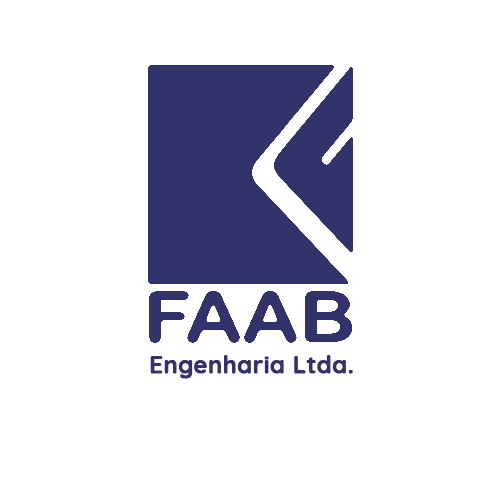
<style>
.page{position:relative;width:500px;height:500px;background:#ffffff}
.page>*{position:absolute;margin:0}
.t1{font:23.8px "Quicksand-Bold";color:#32336b;font-weight:bold}
</style>
<div class="page">
<p class="t1" style="left:150px;top:355px;width:203px;height:24px">Engenharia Ltda.</p>
</div>
